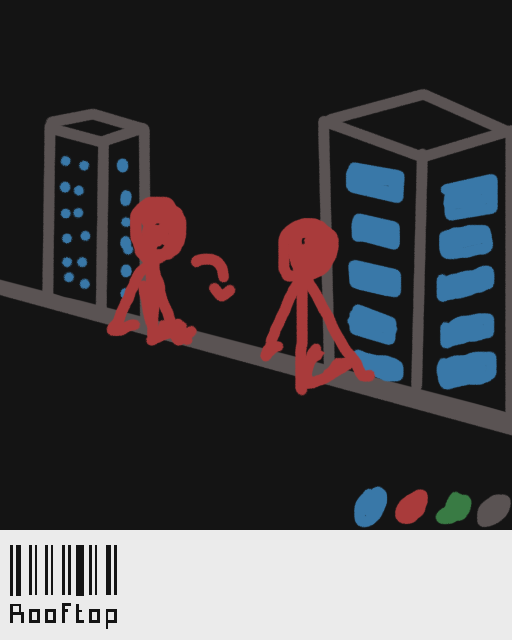
<style>
.page{position:relative;width:512px;height:640px;background:#141414}
.page>*{position:absolute;margin:0}
.t1{font:72px "Paskowy";color:#141414}
</style>
<div class="page">
<p class="t1" style="left:10px;top:545px;width:107px;height:84px">Rooftop</p>
</div>
